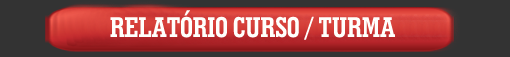
<style>
.page{position:relative;width:510px;height:57px;background:#333333}
.page>*{position:absolute;margin:0}
.t1{font:28.7px "GeometricSlab703BT-BoldCond";color:#fffffc;scale:0.97 1}
</style>
<div class="page">
<p class="t1" style="left:110px;top:10px;width:285px;height:30px">RELATÓRIO CURSO / TURMA</p>
</div>
